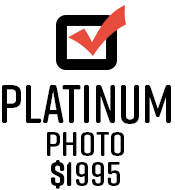
<style>
.page{position:relative;width:175px;height:190px;background:#ffffff}
.page>*{position:absolute;margin:0}
.t1{font:53.8px "RiftSoft-Demi";color:#000000;text-transform:uppercase}
.t2{font:33.7px/30px "RiftSoft-Demi";color:#000000;scale:1.11 1}
.t3{font:33.7px/30px "RiftSoft-Bold";color:#000000;scale:1.11 1}
</style>
<div class="page">
<p class="t1" style="left:2px;top:85px;width:169px;height:39px">Platinum</p>
<p class="t2" style="left:47px;top:132px;width:77px;height:57px;text-align:center">Photo<br><span class="t3">$1</span>995</p>
</div>
